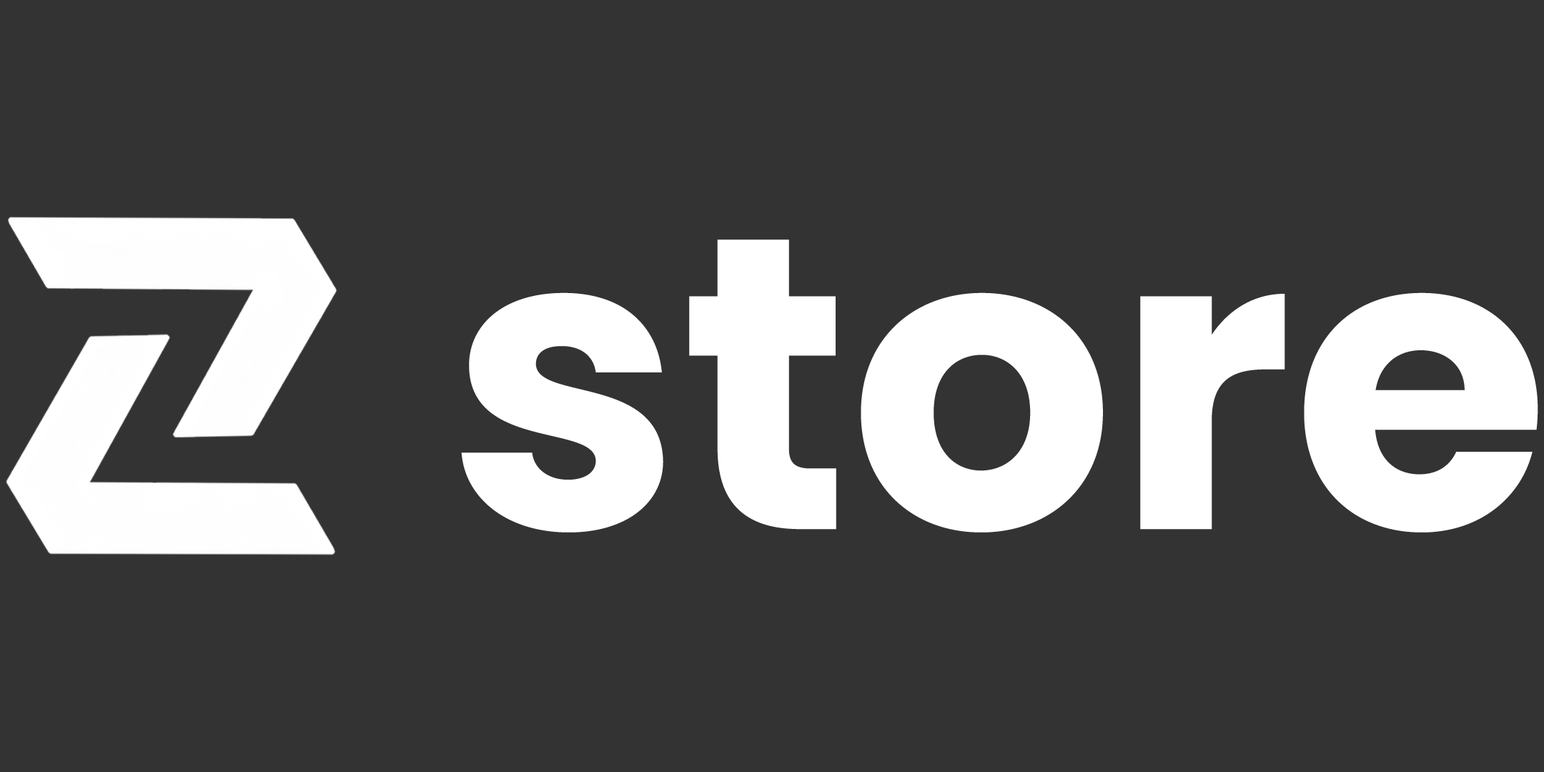
<style>
.page{position:relative;width:1544px;height:772px;background:#333333}
.page>*{position:absolute;margin:0}
.t1{font:417px "Poppins-Bold";color:#ffffff}
</style>
<div class="page">
<p class="t1" style="left:461px;top:240px;width:1078px;height:293px">store</p>
</div>
